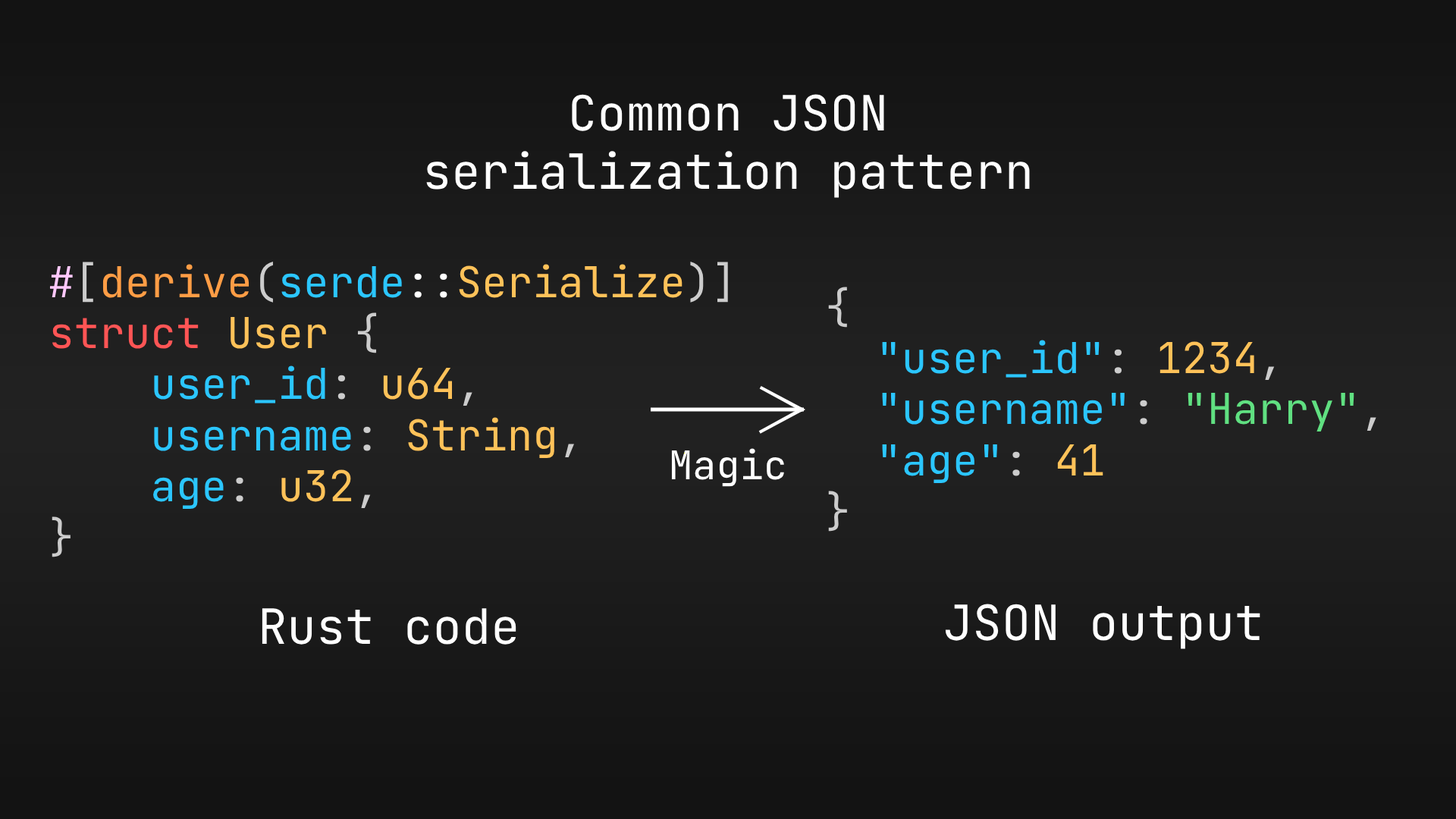
<style>
.page{position:relative;width:1456px;height:819px}
.page>*{position:absolute;margin:0}
.t1{font:48.5px "JetBrainsMono-Regular";color:#ffffff}
.t2{font:42.5px "JetBrainsMono-Regular";color:#ffc259}
.t3{font:42.5px "JetBrainsMono-Regular";color:#ffc8fc}
.t4{font:42.5px "JetBrainsMono-Regular";color:#cccccc}
.t5{font:42.5px "JetBrainsMono-Regular";color:#ff9d45}
.t6{font:42.5px "JetBrainsMono-Regular";color:#2bc6ff}
.t7{font:42.5px "JetBrainsMono-Regular";color:#ffffff}
.t8{font:42.5px "JetBrainsMono-Regular";color:#ff5555}
.t9{font:42.5px "JetBrainsMono-Regular";color:#60e081}
.t10{font:39.4px "JetBrainsMono-Regular";color:#ffffff}
</style>
<div class="page">
<p class="t1" style="left:426px;top:94px;width:604px;height:104px;text-align:center">Common JSON<br>serialization pattern</p>
<p class="t2" style="left:49px;top:261px;width:679px;height:296px"><span class="t3">#</span><span class="t4">[</span><span class="t5">derive</span><span class="t4">(</span><span class="t6">serde</span><span class="t7">::</span>Serialize<span class="t4">)]<br></span><span class="t8">struct </span>User <span class="t4">{<br>    </span><span class="t6">user_id</span><span class="t4">: </span>u64<span class="t4">,<br>    </span><span class="t6">username</span><span class="t4">: </span>String<span class="t4">,<br>    </span><span class="t6">age</span><span class="t4">: </span>u32<span class="t4">,<br>}</span></p>
<p class="t6" style="left:828px;top:287px;width:548px;height:245px"><span class="t4">{<br>  </span>"user_id"<span class="t4">: </span><span class="t2">1234</span><span class="t4">,<br>  </span>"username"<span class="t4">: </span><span class="t9">"Harry"</span><span class="t4">,<br>  </span>"age"<span class="t4">: </span><span class="t2">41<br></span><span class="t4">}</span></p>
<p class="t10" style="left:671px;top:448px;width:113px;height:39px">Magic</p>
<p class="t1" style="left:945px;top:604px;width:315px;height:45px">JSON output</p>
<p class="t1" style="left:262px;top:608px;width:254px;height:37px">Rust code</p>
</div>
